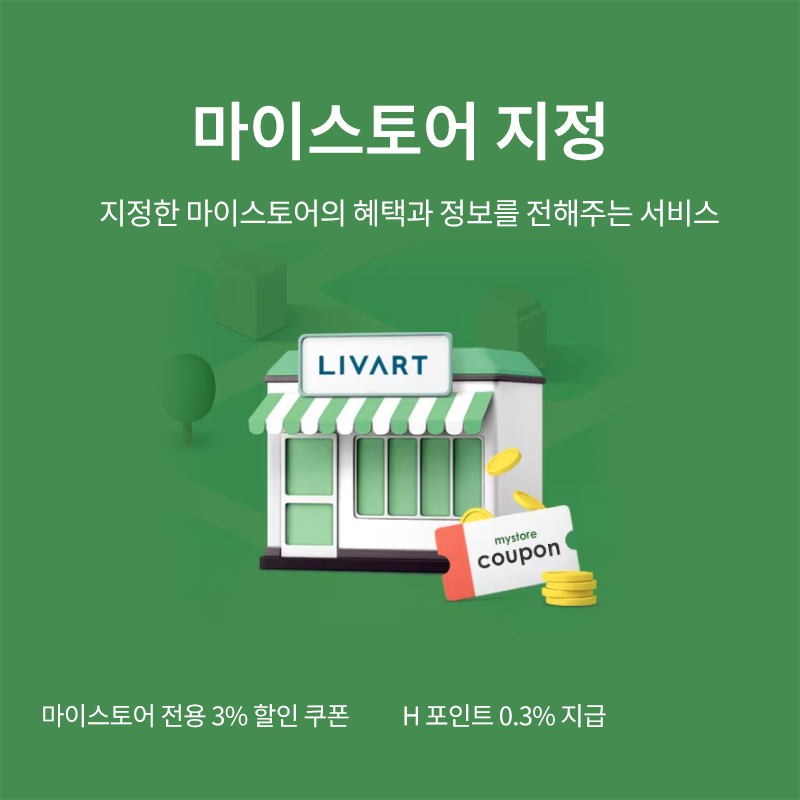
<style>
.page{position:relative;width:800px;height:800px;background:#448c50}
.page>*{position:absolute;margin:0}
.t1{font:63.6px "NotoSansKR-SemiBold";letter-spacing:-0.01em;color:#ffffff;text-transform:uppercase}
.t2{font:30px "NotoSansKR-Regular";letter-spacing:-0.025em;color:#ffffff;text-transform:uppercase}
.t3{font:25.6px "NotoSansKR-Regular";letter-spacing:-0.025em;color:#ffffff;text-transform:uppercase}
</style>
<div class="page">
<p class="t1" style="left:195px;top:101px;width:409px;height:60px">마이스토어 지정</p>
<p class="t2" style="left:100px;top:199px;width:619px;height:28px">지정한 마이스토어의 혜택과 정보를 전해주는 서비스</p>
<p class="t3" style="left:43px;top:704px;width:306px;height:24px">마이스토어 전용 3% 할인 쿠폰</p>
<p class="t3" style="left:404px;top:704px;width:202px;height:24px">H 포인트 0.3% 지급</p>
</div>
